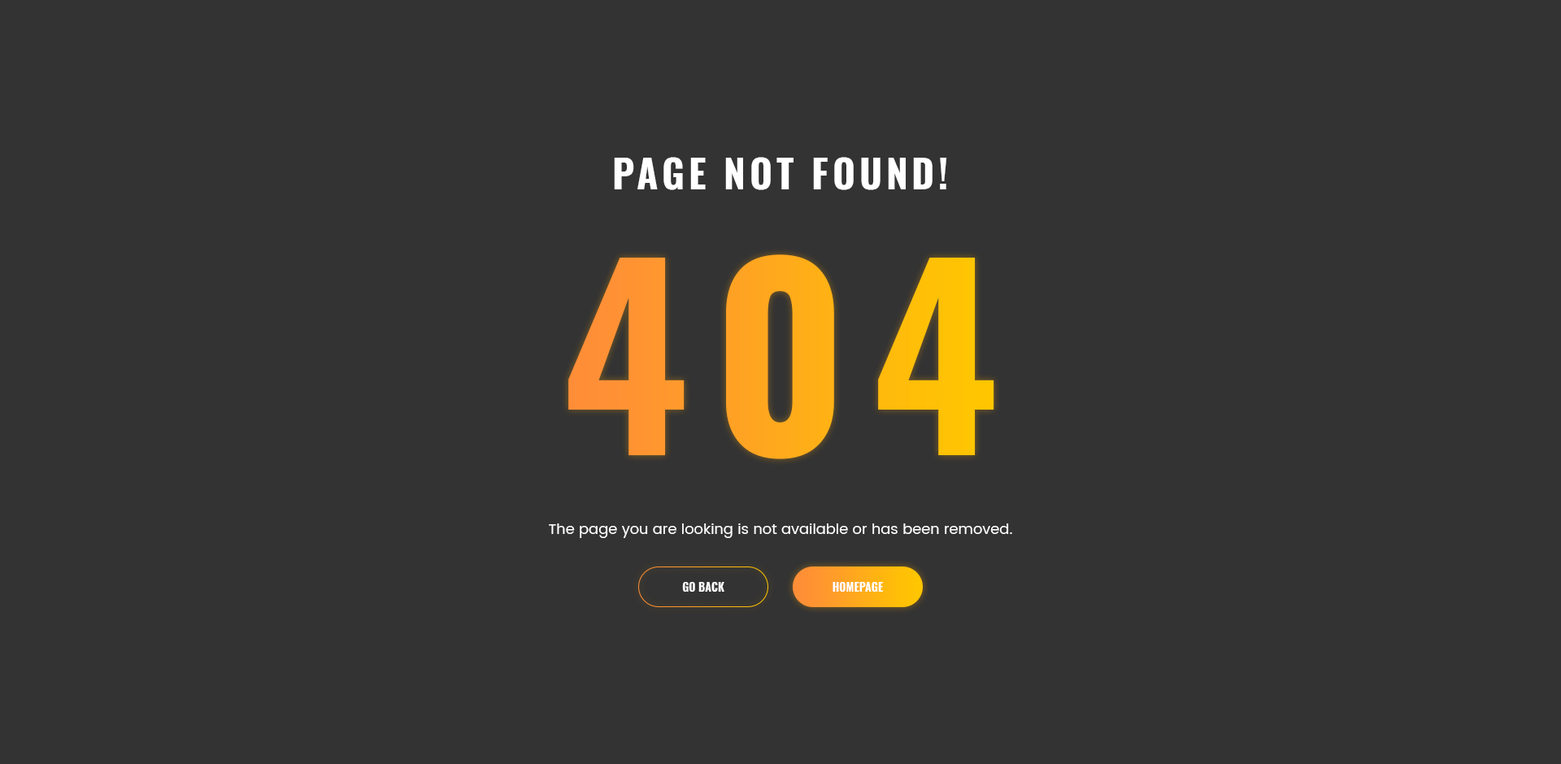
<style>
.page{position:relative;width:1561px;height:764px;background:#333333}
.page>*{position:absolute;margin:0}
.t1{font:39px "Oswald-Bold";letter-spacing:0.1em;color:#ffffff;text-transform:uppercase}
.t2{font:243.9px "Oswald-Bold";letter-spacing:0.1em;text-transform:uppercase}
.t3{font:14.6px "Poppins-Regular";color:#ffffff}
.t4{font:11.4px "Oswald-Bold";color:#ffffff;text-transform:uppercase}
</style>
<div class="page">
<p class="t1" style="left:614px;top:157px;width:333px;height:33px">page not found!</p>
<p class="t2" style="left:568px;top:254px;width:426px;height:205px">404</p>
<p class="t3" style="left:549px;top:523px;width:463px;height:15px">The page you are looking is not available or has been removed.</p>
<p class="t4" style="left:682px;top:582px;width:42px;height:10px">go back</p>
<p class="t4" style="left:832px;top:582px;width:51px;height:10px">homepage</p>
</div>
